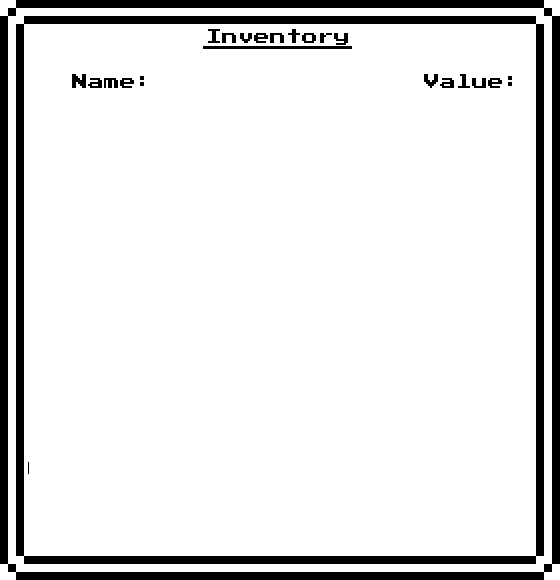
<style>
.page{position:relative;width:560px;height:580px;background:#ffffff}
.page>*{position:absolute;margin:0}
.t1{font:16px "PressStart2P";color:#000000}
</style>
<div class="page">
<p class="t1" style="left:208px;top:29px;width:140px;height:16px">Inventory</p>
<p class="t1" style="left:72px;top:74px;width:440px;height:14px">Name:                 Value:</p>
</div>
